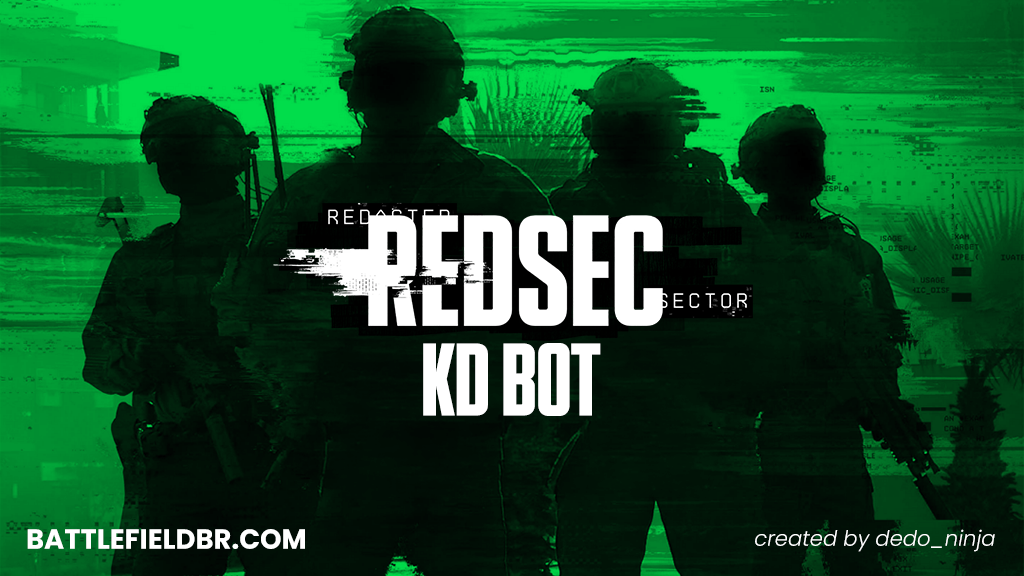
<style>
.page{position:relative;width:1024px;height:576px}
.page>*{position:absolute;margin:0}
.t1{font:102.4px "BF_HEADLINE_NARROW-BOLD";color:#ffffff;text-transform:uppercase}
.t2{font:27.6px "Poppins-Bold";color:#ffffff;text-transform:uppercase}
.t3{font:21.3px "Poppins-LightItalic";color:#ffffff}
</style>
<div class="page">
<p class="t1" style="left:423px;top:343px;width:178px;height:73px">kd bot</p>
<p class="t2" style="left:27px;top:529px;width:278px;height:20px">battlefieldbr.com</p>
<p class="t3" style="left:755px;top:529px;width:240px;height:23px">created by dedo_ninja</p>
</div>
